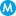
<style>
.page{position:relative;width:16px;height:16px;background:#029fe2}
.page>*{position:absolute;margin:0}
.t1{font:14px "OpelSans-Condensed";color:#ffffff;text-transform:uppercase}
</style>
<div class="page">
<p class="t1" style="left:2px;top:3px;width:11px;height:9px">М</p>
</div>
